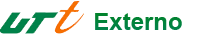
<style>
.page{position:relative;width:205px;height:34px;background:#ffffff}
.page>*{position:absolute;margin:0}
.t1{font:24px "Arial-BoldMT";color:#01823c}
</style>
<div class="page">
<p class="t1" style="left:95px;top:13px;width:87px;height:17px">Externo</p>
</div>
